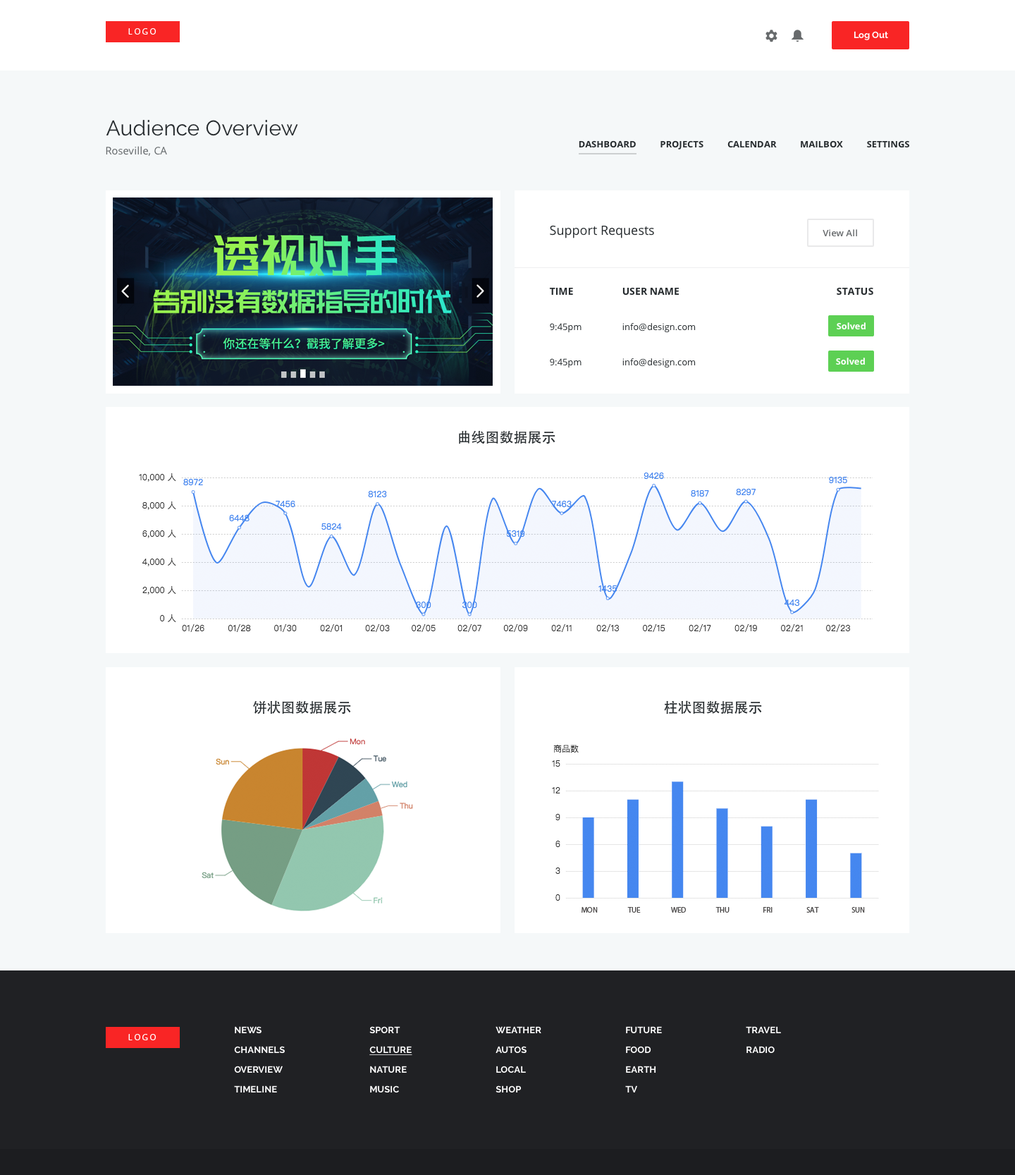
<style>
.page{position:relative;width:1015px;height:1175px;background:#ffffff}
.page>*{position:absolute;margin:0}
.t1{font:8.5px "MyriadPro-Regular";color:#ffffff;text-transform:uppercase}
.t2{font:9.2px "Raleway-Bold";color:#ffffff}
.t3{font:21.2px "Raleway-Regular";color:#262b2e}
.t4{font:10.6px "OpenSans";color:#64686b}
.t5{font:9.2px "OpenSans-Bold";color:#262b2e;text-transform:uppercase}
.t6{font:12.7px "OpenSans";color:#262b2e}
.t7{font:9.2px "OpenSans-Semibold";color:#676a6c}
.t8{font:9.9px "OpenSans-Bold";color:#262b2e;text-transform:uppercase}
.t9{font:9.2px "OpenSans";color:#262b2e}
.t10{font:9.2px "OpenSans-Bold";color:#ffffff}
.t11{font:14.1px "STHeitiSC-Medium";color:#262b2e}
.t12{font:7.8px "MyriadPro-Regular";color:#4e4c4c;text-transform:uppercase}
.t13{font:9.2px/19.7px "Raleway-Bold";color:#ffffff;text-transform:uppercase}
.t14{font:9.2px/19.7px "Raleway-Bold";color:#ffffff;text-transform:uppercase;text-decoration:underline}
</style>
<div class="page">
<p class="t1" style="left:128px;top:28px;width:28px;height:7px">L O G O</p>
<p class="t2" style="left:854px;top:31px;width:34px;height:9px">Log Out</p>
<p class="t3" style="left:106px;top:120px;width:192px;height:16px">Audience Overview</p>
<p class="t4" style="left:106px;top:146px;width:61px;height:10px">Roseville, CA</p>
<p class="t5" style="left:579px;top:140px;width:330px;height:9px">Dashboard          Projects          Calendar          mailbox          settings</p>
<p class="t6" style="left:550px;top:225px;width:104px;height:13px">Support Requests</p>
<p class="t7" style="left:823px;top:229px;width:34px;height:8px">View All</p>
<p class="t8" style="left:549px;top:288px;width:24px;height:7px">Time</p>
<p class="t8" style="left:623px;top:287px;width:56px;height:8px">user name</p>
<p class="t8" style="left:837px;top:287px;width:37px;height:8px">Status</p>
<p class="t9" style="left:550px;top:323px;width:32px;height:10px">9:45pm</p>
<p class="t9" style="left:623px;top:323px;width:73px;height:10px">info@design.com</p>
<p class="t10" style="left:837px;top:322px;width:29px;height:8px">Solved</p>
<p class="t9" style="left:550px;top:358px;width:32px;height:10px">9:45pm</p>
<p class="t9" style="left:623px;top:358px;width:73px;height:10px">info@design.com</p>
<p class="t10" style="left:836px;top:357px;width:29px;height:8px">Solved</p>
<p class="t11" style="left:459px;top:430px;width:97px;height:14px">曲线图数据展示</p>
<p class="t11" style="left:253px;top:700px;width:98px;height:14px">饼状图数据展示</p>
<p class="t11" style="left:664px;top:700px;width:98px;height:14px">柱状图数据展示</p>
<p class="t12" style="left:582px;top:907px;width:16px;height:5px">Mon</p>
<p class="t12" style="left:627px;top:907px;width:14px;height:5px">Tue</p>
<p class="t12" style="left:671px;top:907px;width:15px;height:5px">wed</p>
<p class="t12" style="left:716px;top:907px;width:14px;height:5px">thu</p>
<p class="t12" style="left:764px;top:907px;width:9px;height:5px">fri</p>
<p class="t12" style="left:807px;top:907px;width:12px;height:5px">sat</p>
<p class="t12" style="left:852px;top:907px;width:13px;height:5px">sun</p>
<p class="t13" style="left:234px;top:1026px;width:51px;height:66px">news<br>channels<br>overview<br>timeline</p>
<p class="t13" style="left:369px;top:1026px;width:43px;height:67px">Sport<br><span class="t14">Culture<br></span>Nature<br>Music</p>
<p class="t13" style="left:496px;top:1026px;width:45px;height:67px">weather<br>autos<br>local <br>shop</p>
<p class="t13" style="left:625px;top:1026px;width:37px;height:66px">future<br>food<br>earth<br>tv</p>
<p class="t13" style="left:746px;top:1026px;width:35px;height:27px">travel<br>radio</p>
<p class="t1" style="left:128px;top:1034px;width:28px;height:6px">L O G O</p>
</div>
